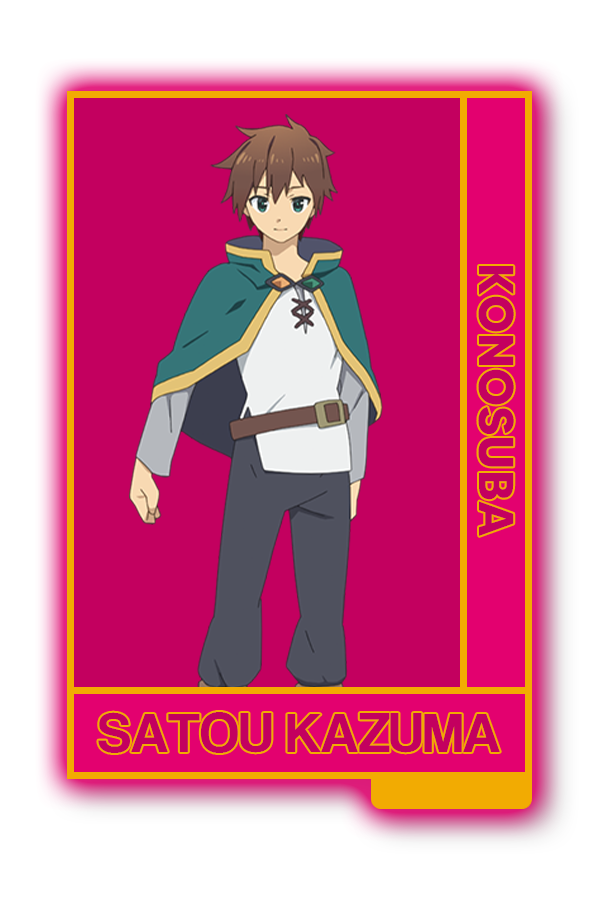
<style>
.page{position:relative;width:600px;height:900px;background:#c3005f}
.page>*{position:absolute;margin:0}
.t1{font:48.8px "MADETOMMY-Bold";color:#c3005f}
.t2{font:57.8px "CoolveticaRg-Regular";color:#c3005f}
</style>
<div class="page">
<p class="t1" style="left:478px;top:266px;width:36px;height:270px;rotate:90deg">KONOSUBA</p>
<p class="t2" style="left:98px;top:712px;width:402px;height:41px">SATOU KAZUMA</p>
</div>
